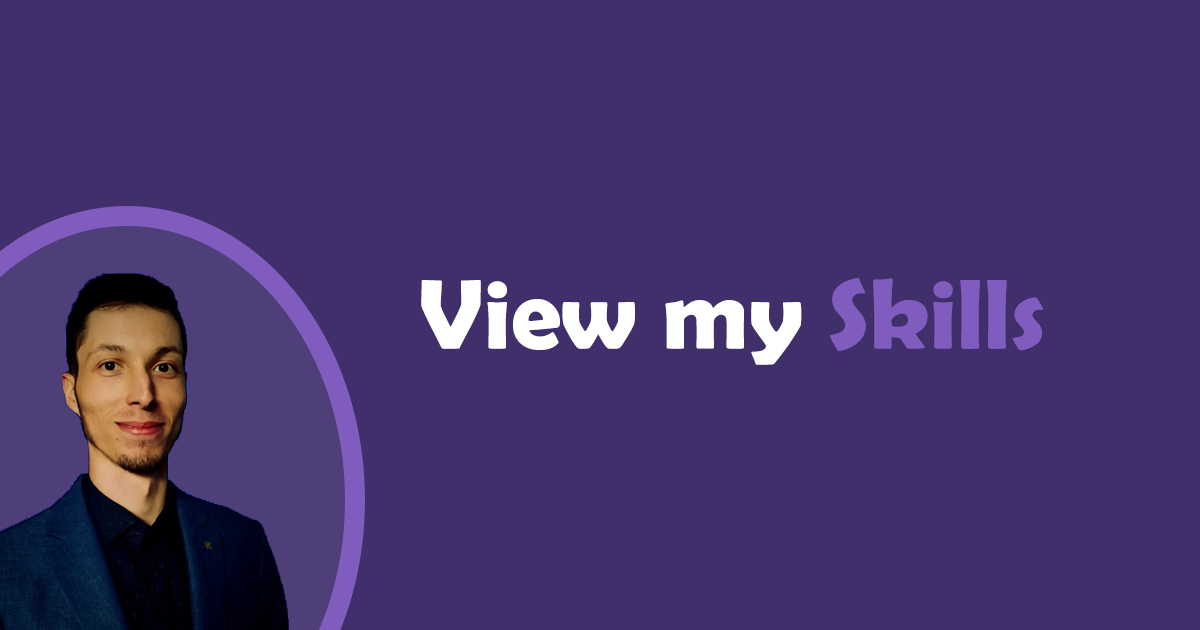
<style>
.page{position:relative;width:1200px;height:630px;background:#402f6a}
.page>*{position:absolute;margin:0}
.t1{font:100px "BerlinSansFBDemi-Bold";color:#ffffff}
.t2{font:100px "BerlinSansFBDemi-Bold";color:#815cbf}
</style>
<div class="page">
<p class="t1" style="left:421px;top:278px;width:622px;height:87px">View my <span class="t2">Skills</span></p>
</div>
